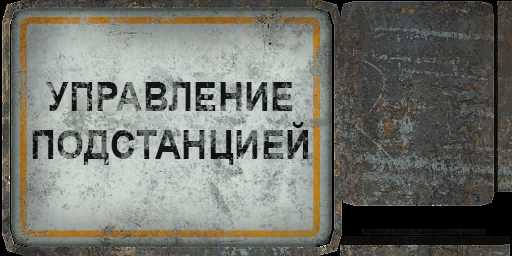
<style>
.page{position:relative;width:512px;height:256px}
.page>*{position:absolute;margin:0}
.t1{font:40px/48px "Arial-BoldMT";scale:0.91 1}
</style>
<div class="page">
<p class="t1" style="left:32px;top:82px;width:276px;height:83px;text-align:center">УПРАВЛЕНИЕ<br>ПОДСТАНЦИЕЙ</p>
</div>
